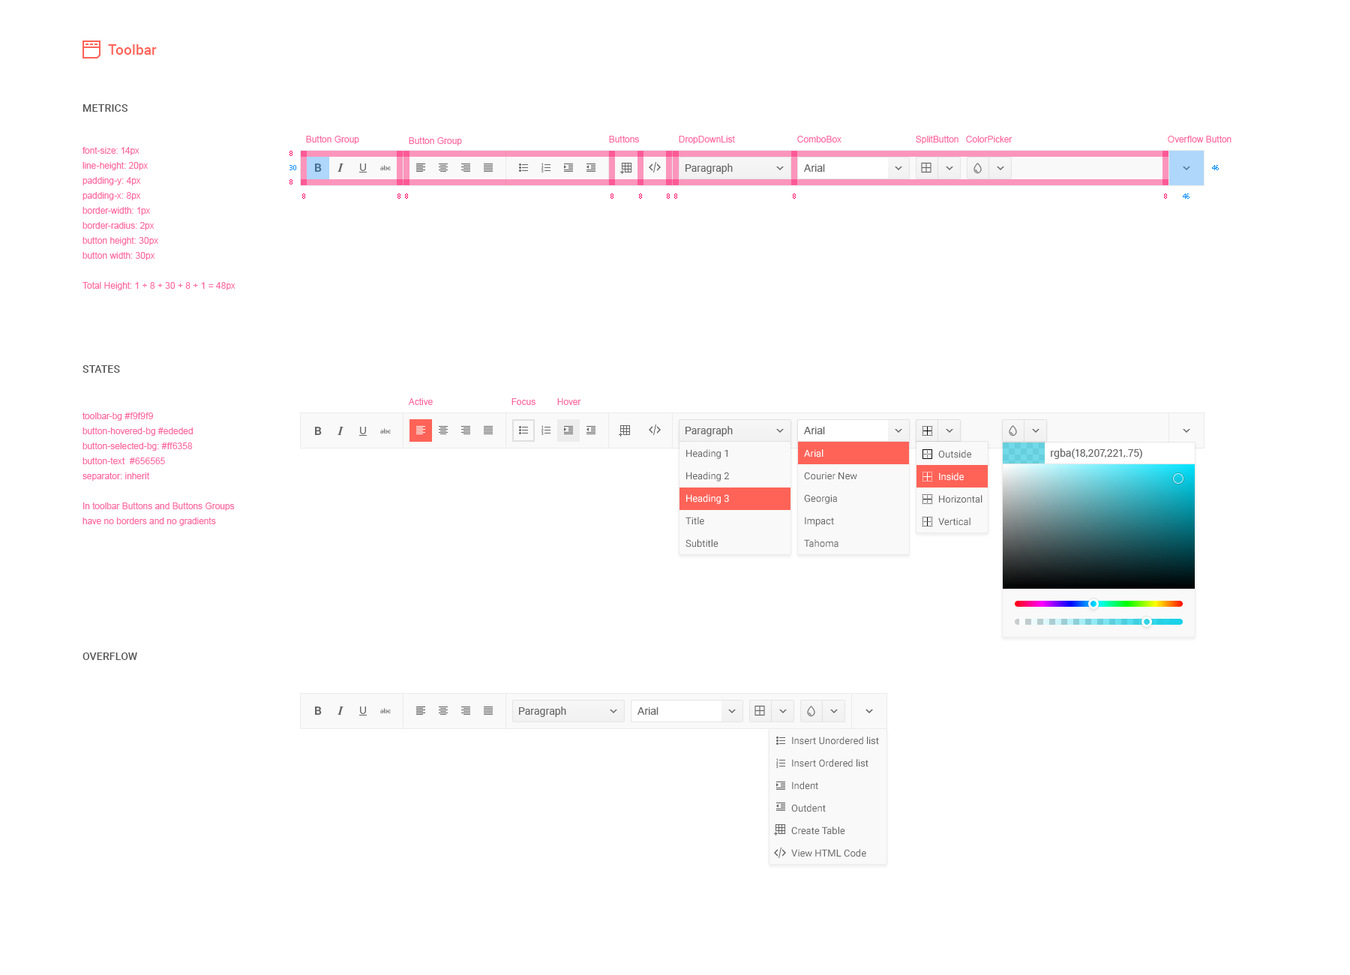
<style>
.page{position:relative;width:1350px;height:975px;background:#ffffff}
.page>*{position:absolute;margin:0}
.t1{font:14.2px "Roboto-Medium";letter-spacing:0.01em;color:#ff6358}
.t2{font:10.5px "Roboto-Medium";letter-spacing:0.01em;color:#565656;text-transform:uppercase}
.t3{font:9px "ArialMT";color:#ff68a0}
.t4{font:9px/15px "ArialMT";color:#ff68a0}
.t5{font:6.8px "Tahoma";color:#ff0060}
.t6{font:6.8px "Tahoma";color:#008aff}
.t7{font:10.5px "Roboto-Regular";color:#656565}
.t8{font:10.5px "ArialMT";color:#656565}
.t9{font:9.8px/22.5px "Roboto-Regular";color:#656565}
.t10{font:9.8px/22.5px "Roboto-Regular";color:#ffffff}
</style>
<div class="page">
<p class="t1" style="left:108px;top:44px;width:49px;height:11px">Toolbar</p>
<p class="t2" style="left:82px;top:104px;width:46px;height:8px">Metrics</p>
<p class="t3" style="left:306px;top:136px;width:53px;height:8px">Button Group</p>
<p class="t3" style="left:409px;top:137px;width:53px;height:9px">Button Group</p>
<p class="t3" style="left:609px;top:136px;width:30px;height:6px">Buttons</p>
<p class="t3" style="left:679px;top:136px;width:56px;height:8px">DropDownList</p>
<p class="t3" style="left:797px;top:136px;width:45px;height:6px">ComboBox</p>
<p class="t3" style="left:916px;top:136px;width:42px;height:8px">SplitButton</p>
<p class="t3" style="left:966px;top:136px;width:46px;height:6px">ColorPicker</p>
<p class="t3" style="left:1168px;top:136px;width:64px;height:6px">Оverflow Button</p>
<p class="t4" style="left:82px;top:147px;width:154px;height:143px">font-size: 14px<br>line-height: 20px<br>padding-y: 4px<br>padding-x: 8px<br>border-width: 1px<br>border-radius: 2px<br>button height: 30px<br>button width: 30px<br><br>Total Height: 1 + 8 + 30 + 8 + 1 = 48px</p>
<p class="t5" style="left:290px;top:151px;width:2px;height:5px">8</p>
<p class="t6" style="left:290px;top:165px;width:6px;height:5px">30</p>
<p class="t7" style="left:686px;top:164px;width:47px;height:10px">Paragraph</p>
<p class="t8" style="left:804px;top:164px;width:21px;height:8px">Arial</p>
<p class="t6" style="left:1212px;top:165px;width:7px;height:5px">46</p>
<p class="t5" style="left:290px;top:179px;width:2px;height:5px">8</p>
<p class="t5" style="left:302px;top:194px;width:3px;height:5px">8</p>
<p class="t5" style="left:398px;top:194px;width:2px;height:5px">8</p>
<p class="t5" style="left:405px;top:194px;width:3px;height:5px">8</p>
<p class="t5" style="left:610px;top:194px;width:4px;height:5px">8</p>
<p class="t5" style="left:639px;top:194px;width:3px;height:5px">8</p>
<p class="t5" style="left:667px;top:194px;width:3px;height:5px">8</p>
<p class="t5" style="left:674px;top:194px;width:3px;height:5px">8</p>
<p class="t5" style="left:793px;top:194px;width:3px;height:5px">8</p>
<p class="t5" style="left:1164px;top:194px;width:3px;height:5px">8</p>
<p class="t6" style="left:1183px;top:194px;width:7px;height:5px">46</p>
<p class="t2" style="left:82px;top:365px;width:38px;height:8px">States</p>
<p class="t3" style="left:408px;top:398px;width:25px;height:7px">Active</p>
<p class="t3" style="left:512px;top:398px;width:24px;height:7px">Focus</p>
<p class="t3" style="left:557px;top:398px;width:24px;height:7px">Hover</p>
<p class="t4" style="left:82px;top:412px;width:153px;height:114px">toolbar-bg #f9f9f9<br>button-hovered-bg #ededed<br>button-selected-bg: #ff6358<br>button-text  #656565<br>separator: inherit <br><br>In toolbar Buttons and Buttons Groups have no borders and no gradients</p>
<p class="t7" style="left:686px;top:426px;width:47px;height:10px">Paragraph</p>
<p class="t8" style="left:804px;top:427px;width:21px;height:7px">Arial</p>
<p class="t9" style="left:686px;top:449px;width:43px;height:99px">Heading 1<br>Heading 2<br><span class="t10">Heading 3<br></span>Title<br>Subtitle</p>
<p class="t9" style="left:804px;top:449px;width:53px;height:99px"><span class="t10">Arial<br></span>Courier New<br>Georgia<br>Impact<br>Tahoma</p>
<p class="t7" style="left:1051px;top:448px;width:91px;height:11px">rgba(18,207,221,.75)</p>
<p class="t9" style="left:938px;top:450px;width:44px;height:76px">Outside<br><span class="t10">Inside<br></span>Horizontal<br>Vertical</p>
<p class="t2" style="left:82px;top:652px;width:55px;height:8px">OverFlow</p>
<p class="t7" style="left:519px;top:706px;width:47px;height:11px">Paragraph</p>
<p class="t8" style="left:638px;top:707px;width:20px;height:8px">Arial</p>
<p class="t9" style="left:791px;top:736px;width:88px;height:121px">Insert Unordered list<br>Insert Ordered list<br>Indent<br>Outdent<br>Create Table<br>View HTML Code</p>
</div>
